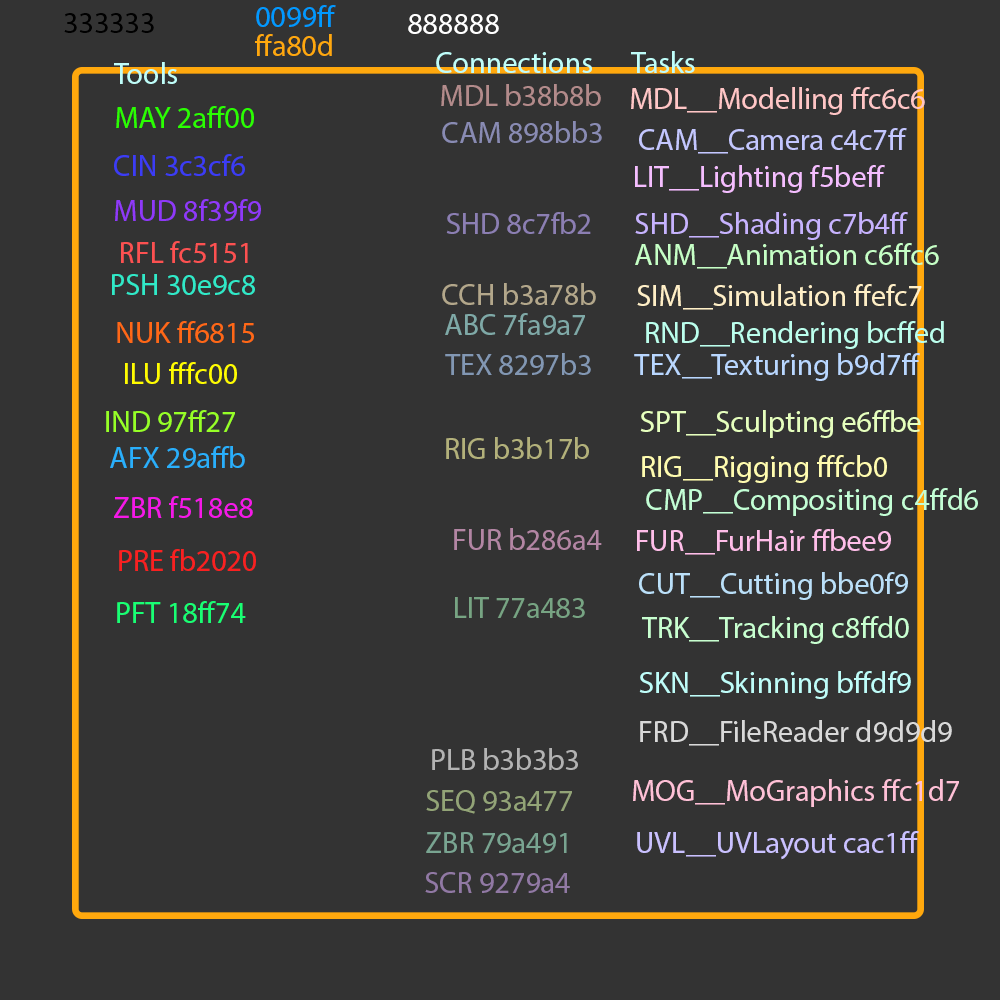
<style>
.page{position:relative;width:1000px;height:1000px;background:#333333}
.page>*{position:absolute;margin:0}
.t1{font:30px "MyriadPro-Regular";color:#0099ff}
.t2{font:30px "MyriadPro-Regular";color:#000000}
.t3{font:30px "MyriadPro-Regular";color:#ffffff}
.t4{font:30px "MyriadPro-Regular";color:#ffa80d}
.t5{font:30px "MyriadPro-Regular";color:#bffdf9}
.t6{font:30px "MyriadPro-Regular";color:#b38b8b}
.t7{font:30px "MyriadPro-Regular";color:#ffc6c6}
.t8{font:30px "MyriadPro-Regular";color:#2aff00}
.t9{font:30px "MyriadPro-Regular";color:#898bb3}
.t10{font:30px "MyriadPro-Regular";color:#c4c7ff}
.t11{font:30px "MyriadPro-Regular";color:#3c3cf6}
.t12{font:30px "MyriadPro-Regular";color:#f5beff}
.t13{font:30px "MyriadPro-Regular";color:#8f39f9}
.t14{font:30px "MyriadPro-Regular";color:#8c7fb3}
.t15{font:30px "MyriadPro-Regular";color:#c7b3fe}
.t16{font:30px "MyriadPro-Regular";color:#fc5151}
.t17{font:30px "MyriadPro-Regular";color:#c6ffc6}
.t18{font:30px "MyriadPro-Regular";color:#30e9c8}
.t19{font:30px "MyriadPro-Regular";color:#b3a78b}
.t20{font:30px "MyriadPro-Regular";color:#ffefc7}
.t21{font:30px "MyriadPro-Regular";color:#7fa9a7}
.t22{font:30px "MyriadPro-Regular";color:#ff6816}
.t23{font:30px "MyriadPro-Regular";color:#bcffed}
.t24{font:30px "MyriadPro-Regular";color:#8297b3}
.t25{font:30px "MyriadPro-Regular";color:#b9d7ff}
.t26{font:30px "MyriadPro-Regular";color:#fffc00}
.t27{font:30px "MyriadPro-Regular";color:#97ff27}
.t28{font:30px "MyriadPro-Regular";color:#e6ffbe}
.t29{font:30px "MyriadPro-Regular";color:#b3b17b}
.t30{font:30px "MyriadPro-Regular";color:#29affb}
.t31{font:30px "MyriadPro-Regular";color:#fffcb0}
.t32{font:30px "MyriadPro-Regular";color:#f518e8}
.t33{font:30px "MyriadPro-Regular";color:#c3fed5}
.t34{font:30px "MyriadPro-Regular";color:#b386a4}
.t35{font:30px "MyriadPro-Regular";color:#ffbee9}
.t36{font:30px "MyriadPro-Regular";color:#fa2020}
.t37{font:30px "MyriadPro-Regular";color:#bbe0f9}
.t38{font:30px "MyriadPro-Regular";color:#18ff74}
.t39{font:30px "MyriadPro-Regular";color:#77a483}
.t40{font:30px "MyriadPro-Regular";color:#c8ffd0}
.t41{font:30px "MyriadPro-Regular";color:#d9d9d9}
.t42{font:30px "MyriadPro-Regular";color:#b3b3b3}
.t43{font:30px "MyriadPro-Regular";color:#ffc1d7}
.t44{font:30px "MyriadPro-Regular";color:#93a477}
.t45{font:30px "MyriadPro-Regular";color:#79a491}
.t46{font:30px "MyriadPro-Regular";color:#cac1ff}
.t47{font:30px "MyriadPro-Regular";color:#9179a4}
</style>
<div class="page">
<p class="t1" style="left:256px;top:5px;width:80px;height:22px">0099ff</p>
<p class="t2" style="left:64px;top:13px;width:90px;height:20px">333333</p>
<p class="t3" style="left:408px;top:14px;width:91px;height:20px">888888</p>
<p class="t4" style="left:255px;top:34px;width:77px;height:22px">ffa80d</p>
<p class="t5" style="left:436px;top:52px;width:156px;height:21px">Connections</p>
<p class="t5" style="left:631px;top:51px;width:64px;height:22px">Tasks</p>
<p class="t5" style="left:114px;top:62px;width:63px;height:22px">Tools</p>
<p class="t6" style="left:441px;top:84px;width:160px;height:22px">MDL b38b8b</p>
<p class="t7" style="left:631px;top:87px;width:294px;height:28px">MDL__Modelling ffc6c6</p>
<p class="t8" style="left:116px;top:106px;width:138px;height:22px">MAY 2aff00</p>
<p class="t9" style="left:442px;top:121px;width:160px;height:22px">CAM 898bb3</p>
<p class="t10" style="left:639px;top:128px;width:268px;height:26px">CAM__Camera c4c7ff</p>
<p class="t11" style="left:114px;top:154px;width:131px;height:22px">CIN 3c3cf6</p>
<p class="t12" style="left:635px;top:165px;width:250px;height:28px">LIT__Lighting f5beff</p>
<p class="t13" style="left:115px;top:199px;width:146px;height:22px">MUD 8f39f9</p>
<p class="t14" style="left:446px;top:212px;width:145px;height:22px">SHD 8c7fb2</p>
<p class="t15" style="left:635px;top:212px;width:273px;height:28px">SHD__Shading c7b4ff</p>
<p class="t16" style="left:121px;top:241px;width:127px;height:22px">RFL fc5151</p>
<p class="t17" style="left:635px;top:243px;width:304px;height:26px">ANM__Animation c6ffc6</p>
<p class="t18" style="left:112px;top:274px;width:143px;height:21px">PSH 30e9c8</p>
<p class="t19" style="left:442px;top:283px;width:154px;height:22px">CCH b3a78b</p>
<p class="t20" style="left:637px;top:284px;width:285px;height:26px">SIM__Simulation ffefc7</p>
<p class="t21" style="left:445px;top:313px;width:140px;height:22px">ABC 7fa9a7</p>
<p class="t22" style="left:117px;top:321px;width:137px;height:22px">NUK ff6815</p>
<p class="t23" style="left:646px;top:321px;width:298px;height:28px">RND__Rendering bcffed</p>
<p class="t24" style="left:445px;top:353px;width:146px;height:22px">TEX 8297b3</p>
<p class="t25" style="left:634px;top:353px;width:286px;height:28px">TEX__Texturing b9d7ff</p>
<p class="t26" style="left:125px;top:362px;width:112px;height:22px">ILU fffc00</p>
<p class="t27" style="left:106px;top:410px;width:129px;height:22px">IND 97ff27</p>
<p class="t28" style="left:640px;top:410px;width:281px;height:28px">SPT__Sculpting e6ffbe</p>
<p class="t29" style="left:446px;top:437px;width:143px;height:22px">RIG b3b17b</p>
<p class="t30" style="left:110px;top:446px;width:135px;height:22px">AFX 29affb</p>
<p class="t31" style="left:642px;top:455px;width:245px;height:28px">RIG__Rigging fffcb0</p>
<p class="t32" style="left:114px;top:496px;width:139px;height:22px">ZBR f518e8</p>
<p class="t33" style="left:646px;top:488px;width:332px;height:28px">CMP__Compositing c4ffd6</p>
<p class="t34" style="left:454px;top:528px;width:148px;height:22px">FUR b286a4</p>
<p class="t35" style="left:637px;top:529px;width:254px;height:26px">FUR__FurHair ffbee9</p>
<p class="t36" style="left:119px;top:549px;width:137px;height:22px">PRE fb2020</p>
<p class="t37" style="left:639px;top:572px;width:269px;height:28px">CUT__Cutting bbe0f9</p>
<p class="t38" style="left:117px;top:601px;width:129px;height:22px">PFT 18ff74</p>
<p class="t39" style="left:455px;top:597px;width:130px;height:21px">LIT 77a483</p>
<p class="t40" style="left:642px;top:616px;width:267px;height:28px">TRK__Tracking c8ffd0</p>
<p class="t5" style="left:639px;top:671px;width:272px;height:28px">SKN__Skinning bffdf9</p>
<p class="t41" style="left:640px;top:720px;width:312px;height:26px">FRD__FileReader d9d9d9</p>
<p class="t42" style="left:432px;top:748px;width:146px;height:22px">PLB b3b3b3</p>
<p class="t43" style="left:633px;top:779px;width:326px;height:28px">MOG__MoGraphics ffc1d7</p>
<p class="t44" style="left:426px;top:790px;width:146px;height:24px">SEQ 93a477</p>
<p class="t45" style="left:426px;top:832px;width:141px;height:21px">ZBR 79a491</p>
<p class="t46" style="left:637px;top:831px;width:282px;height:29px">UVL__UVLayout cac1ff</p>
<p class="t47" style="left:425px;top:872px;width:145px;height:21px">SCR 9279a4</p>
</div>
